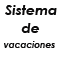
<style>
.page{position:relative;width:60px;height:60px;background:#ffffff}
.page>*{position:absolute;margin:0}
.t1{font:14px "CenturyGothic-BoldItalic";color:#0d0c0c}
.t2{font:9px "CenturyGothic-BoldItalic";color:#0d0c0c}
</style>
<div class="page">
<p class="t1" style="left:5px;top:5px;width:52px;height:10px">Sistema</p>
<p class="t1" style="left:21px;top:23px;width:19px;height:10px">de</p>
<p class="t2" style="left:4px;top:41px;width:51px;height:7px">vacaciones</p>
</div>
